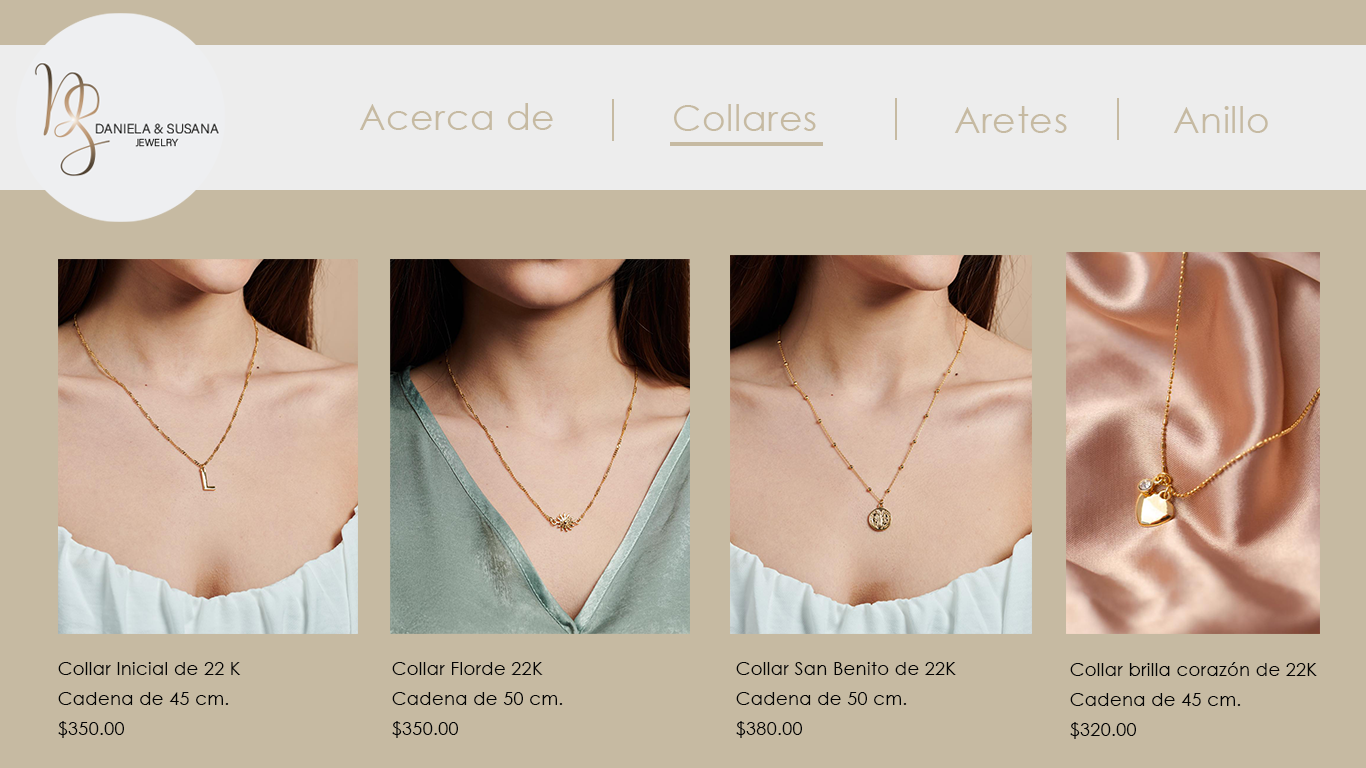
<style>
.page{position:relative;width:1366px;height:768px;background:#c6baa2}
.page>*{position:absolute;margin:0}
.t1{font:36px "CenturyGothic";letter-spacing:0.02em;color:#c6baa2}
.t2{font:17.9px/30px "CenturyGothic";letter-spacing:0.02em;color:#030303}
</style>
<div class="page">
<p class="t1" style="left:359px;top:103px;width:194px;height:27px">Acerca de</p>
<p class="t1" style="left:674px;top:104px;width:142px;height:27px">Collares</p>
<p class="t1" style="left:954px;top:106px;width:113px;height:27px">Aretes</p>
<p class="t1" style="left:1173px;top:106px;width:95px;height:27px">Anillo</p>
<p class="t2" style="left:58px;top:662px;width:183px;height:76px">Collar Inicial de 22 K<br>Cadena de 45 cm.<br>$350.00</p>
<p class="t2" style="left:392px;top:662px;width:171px;height:76px">Collar Florde 22K <br>Cadena de 50 cm.<br>$350.00</p>
<p class="t2" style="left:736px;top:662px;width:220px;height:76px">Collar San Benito de 22K<br>Cadena de 50 cm.<br>$380.00</p>
<p class="t2" style="left:1070px;top:662px;width:247px;height:77px">Collar brilla corazón de 22K<br>Cadena de 45 cm.<br>$320.00</p>
</div>
